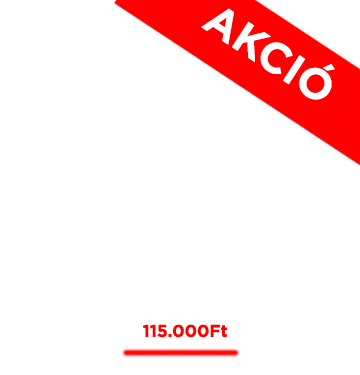
<style>
.page{position:relative;width:360px;height:375px;background:#ffffff}
.page>*{position:absolute;margin:0}
.t1{font:43px "Gotham-Bold";color:#ffffff}
.t2{font:17px "Gotham-Bold";color:#ff0000}
</style>
<div class="page">
<p class="t1" style="left:201px;top:8px;width:134px;height:92px;rotate:33deg">AKCIÓ</p>
<p class="t2" style="left:143px;top:324px;width:84px;height:14px">115.000Ft</p>
</div>
